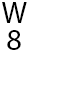
<style>
.page{position:relative;width:60px;height:100px;background:#ffffff}
.page>*{position:absolute;margin:0}
.t1{font:30px "MyriadPro-Regular";color:#000000}
</style>
<div class="page">
<p class="t1" style="left:2px;top:2px;width:25px;height:21px">W</p>
<p class="t1" style="left:7px;top:30px;width:14px;height:20px">8</p>
</div>
